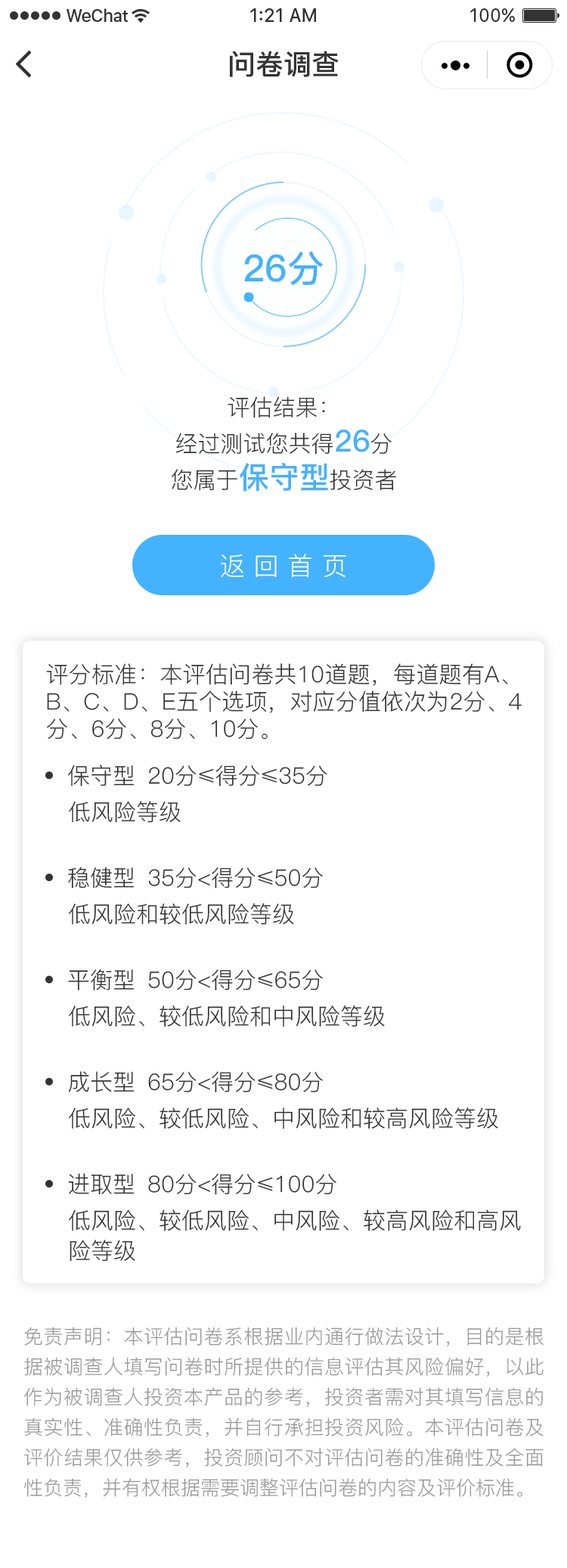
<style>
.page{position:relative;width:567px;height:1568px;background:#ffffff}
.page>*{position:absolute;margin:0}
.t1{font:28px "PingFang-SC-Bold";color:#333333}
.t2{font:37.2px "PingFang-SC-Bold";color:#43b2ff;text-transform:uppercase}
.t3{font:22.7px "PingFang-SC-Regular";color:#333333;text-transform:uppercase}
.t4{font:30.3px "PingFang-SC-Bold";color:#43b2ff;text-transform:uppercase}
.t5{font:25.7px "PingFang-SC-Regular";color:#ffffff}
.t6{font:22.7px "PingFang-SC-Regular";color:#333333}
.t7{font:22.7px/30.3px "PingFang-SC-Regular";color:#333333;text-transform:uppercase}
.t8{font:19.7px/30.3px "PingFang-SC-Regular";color:#999999;text-transform:uppercase}
</style>
<div class="page">
<p class="t1" style="left:230px;top:51px;width:109px;height:26px">问卷调查</p>
<p class="t2" style="left:244px;top:251px;width:80px;height:34px">26分</p>
<p class="t3" style="left:172px;top:396px;width:224px;height:96px;text-align:center">评估结果：<br>经过测试您共得<span class="t4">26</span>分<br>您属于<span class="t4">保守型</span>投资者</p>
<p class="t5" style="left:221px;top:554px;width:125px;height:24px">返 回 首 页</p>
<p class="t6" style="left:46px;top:663px;width:476px;height:77px;text-align:justify">评分标准：本评估问卷共10道题，每道题有A、B、C、D、E五个选项，对应分值依次为2分、4分、6分、8分、10分。</p>
<p class="t3" style="left:68px;top:765px;width:67px;height:22px">保守型</p>
<p class="t3" style="left:148px;top:765px;width:180px;height:22px">20分≤得分≤35分</p>
<p class="t3" style="left:69px;top:801px;width:112px;height:22px">低风险等级</p>
<p class="t3" style="left:68px;top:867px;width:67px;height:22px">稳健型</p>
<p class="t3" style="left:148px;top:867px;width:175px;height:22px">35分&lt;得分≤50分</p>
<p class="t3" style="left:69px;top:903px;width:225px;height:22px">低风险和较低风险等级</p>
<p class="t3" style="left:68px;top:969px;width:67px;height:22px">平衡型</p>
<p class="t3" style="left:148px;top:969px;width:175px;height:22px">50分&lt;得分≤65分</p>
<p class="t3" style="left:69px;top:1005px;width:316px;height:22px">低风险、较低风险和中风险等级</p>
<p class="t3" style="left:68px;top:1071px;width:67px;height:21px">成长型</p>
<p class="t3" style="left:148px;top:1071px;width:175px;height:22px">65分&lt;得分≤80分</p>
<p class="t3" style="left:69px;top:1107px;width:429px;height:22px">低风险、较低风险、中风险和较高风险等级</p>
<p class="t3" style="left:68px;top:1173px;width:67px;height:22px">进取型</p>
<p class="t3" style="left:148px;top:1173px;width:189px;height:22px">80分&lt;得分≤100分</p>
<p class="t7" style="left:69px;top:1209px;width:452px;height:53px;text-align:justify">低风险、较低风险、中风险、较高风险和高风<br>险等级</p>
<p class="t8" style="left:24px;top:1327px;width:520px;height:171px;text-align:justify">免责声明：本评估问卷系根据业内通行做法设计，目的是根据被调查人填写问卷时所提供的信息评估其风险偏好，以此作为被调查人投资本产品的参考，投资者需对其填写信息的真实性、准确性负责，并自行承担投资风险。本评估问卷及评价结果仅供参考，投资顾问不对评估问卷的准确性及全面性负责，并有权根据需要调整评估问卷的内容及评价标准。</p>
</div>
